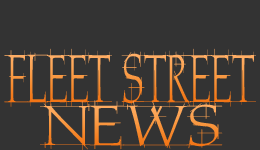
<style>
.page{position:relative;width:260px;height:150px;background:#333333}
.page>*{position:absolute;margin:0}
.t1{font:64px "Home-Remedy-PS";scale:0.61 1}
.t2{font:61.4px "Home-Remedy-PS";scale:1.11 1}
</style>
<div class="page">
<p class="t1" style="left:4px;top:48px;width:252px;height:60px">FLEET STREET</p>
<p class="t2" style="left:40px;top:100px;width:183px;height:51px">news</p>
</div>
